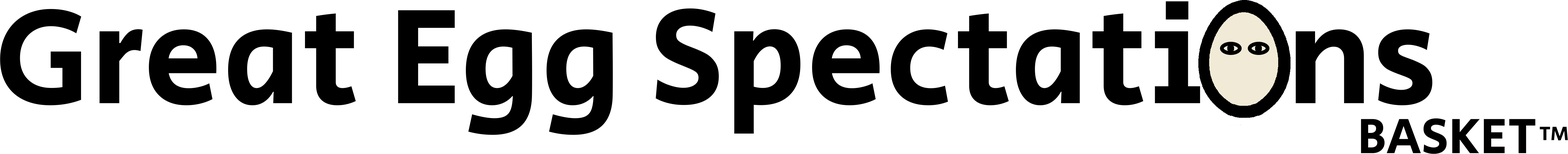
<style>
.page{position:relative;width:1568px;height:154px;background:#ffffff}
.page>*{position:absolute;margin:0}
.t1{font:139.6px "SecularOne-Regular";color:#000000}
.t2{font:51.2px "SecularOne-Regular";color:#000000}
</style>
<div class="page">
<p class="t1" style="left:0px;top:1px;width:1432px;height:134px">Great Egg Spectations</p>
<p class="t2" style="left:1361px;top:118px;width:207px;height:36px">BASKET™</p>
</div>
